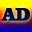
<style>
.page{position:relative;width:32px;height:32px}
.page>*{position:absolute;margin:0}
.t1{font:18.8px "ClarendonBT-Black";color:#0a145f}
</style>
<div class="page">
<p class="t1" style="left:1px;top:8px;width:29px;height:13px">AD</p>
</div>
